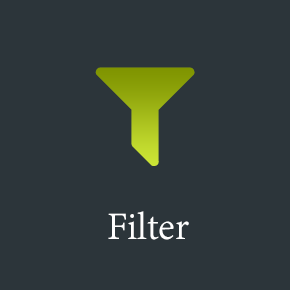
<style>
.page{position:relative;width:290px;height:290px;background:#2c353a}
.page>*{position:absolute;margin:0}
.t1{font:42px "AdobeDevanagari-Regular";color:#ffffff}
</style>
<div class="page">
<p class="t1" style="left:108px;top:211px;width:81px;height:29px">Filter</p>
</div>
